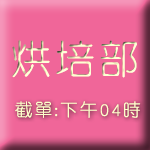
<style>
.page{position:relative;width:150px;height:150px;background:#f06699}
.page>*{position:absolute;margin:0}
.t1{font:40px "DFYuan-Lt-HKP-BF";letter-spacing:0.1em;color:#ffffcc}
.t2{font:18px "DFYuan-Lt-HKP-BF";letter-spacing:0.1em;color:#ffffcc}
</style>
<div class="page">
<p class="t1" style="left:12px;top:40px;width:125px;height:38px">烘培部</p>
<p class="t2" style="left:15px;top:101px;width:126px;height:17px">截單:下午04時</p>
</div>
